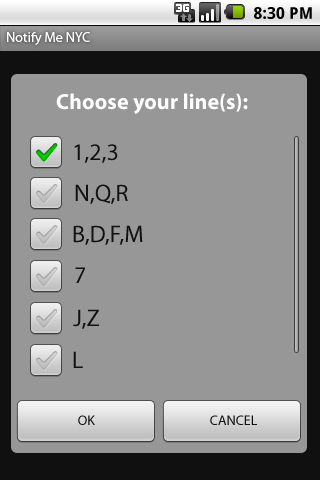
<style>
.page{position:relative;width:320px;height:480px;background:#969796}
.page>*{position:absolute;margin:0}
.t1{font:16px "DroidSans-Bold";letter-spacing:0.005em;color:#000000}
.t2{font:14px "MyriadPro-Regular";color:#ffffff}
.t3{font:22px "MyriadPro-Bold";color:#ffffff}
.t4{font:24px "MyriadPro-Regular";color:#111111}
.t5{font:14px "MyriadPro-Regular";color:#111111}
</style>
<div class="page">
<p class="t1" style="left:254px;top:7px;width:58px;height:12px">8:30 PM</p>
<p class="t2" style="left:7px;top:32px;width:83px;height:13px">Notify Me NYC</p>
<p class="t3" style="left:56px;top:93px;width:192px;height:21px">Choose your line(s):</p>
<p class="t4" style="left:74px;top:144px;width:44px;height:19px">1,2,3</p>
<p class="t4" style="left:75px;top:184px;width:53px;height:20px">N,Q,R</p>
<p class="t4" style="left:73px;top:225px;width:70px;height:20px">B,D,F,M</p>
<p class="t4" style="left:75px;top:267px;width:10px;height:16px">7</p>
<p class="t4" style="left:73px;top:309px;width:26px;height:20px">J,Z</p>
<p class="t4" style="left:73px;top:351px;width:10px;height:17px">L</p>
<p class="t5" style="left:78px;top:415px;width:17px;height:10px">OK</p>
<p class="t5" style="left:210px;top:415px;width:47px;height:10px">CANCEL</p>
</div>
